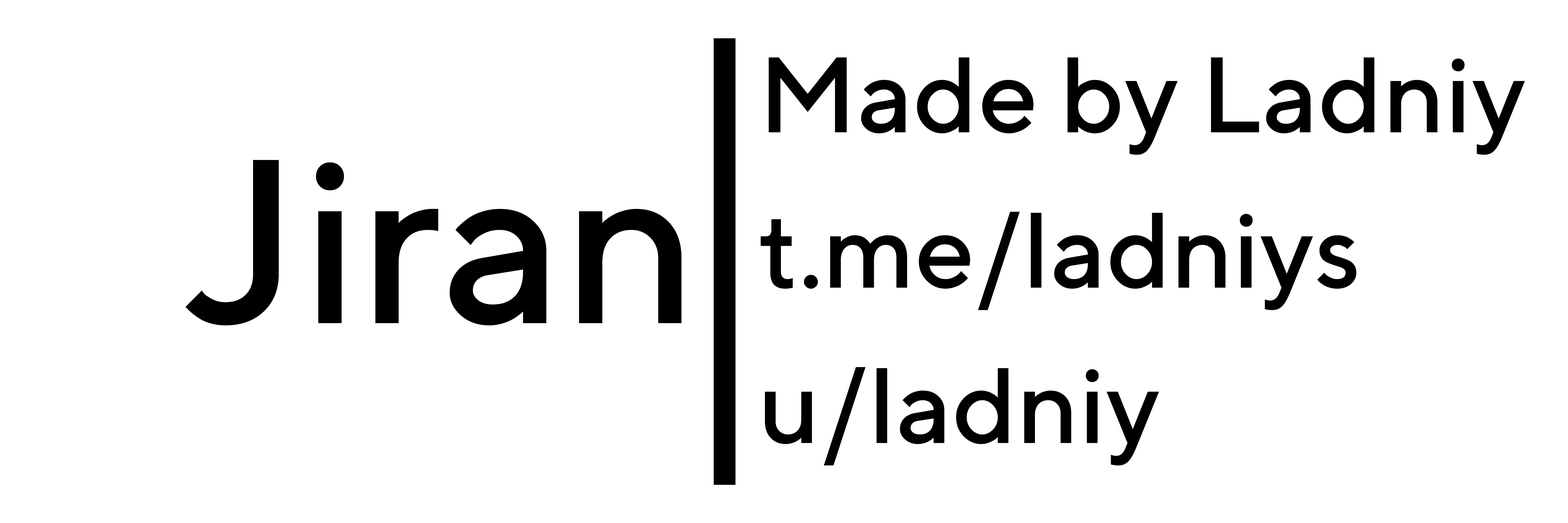
<style>
.page{position:relative;width:1568px;height:523px;background:#ffffff}
.page>*{position:absolute;margin:0}
.t1{font:485.2px "TTNorms-Light";color:#000000}
.t2{font:106.8px/155.3px "TTNorms-Medium";color:#000000}
.t3{font:232.9px "TTNorms-Medium";color:#000000}
</style>
<div class="page">
<p class="t1" style="left:713px;top:38px;width:22px;height:447px">|</p>
<p class="t2" style="left:761px;top:57px;width:764px;height:408px">Made by Ladniy<br>t.me/ladniys<br>u/ladniy</p>
<p class="t3" style="left:185px;top:160px;width:497px;height:165px">Jiran</p>
</div>
